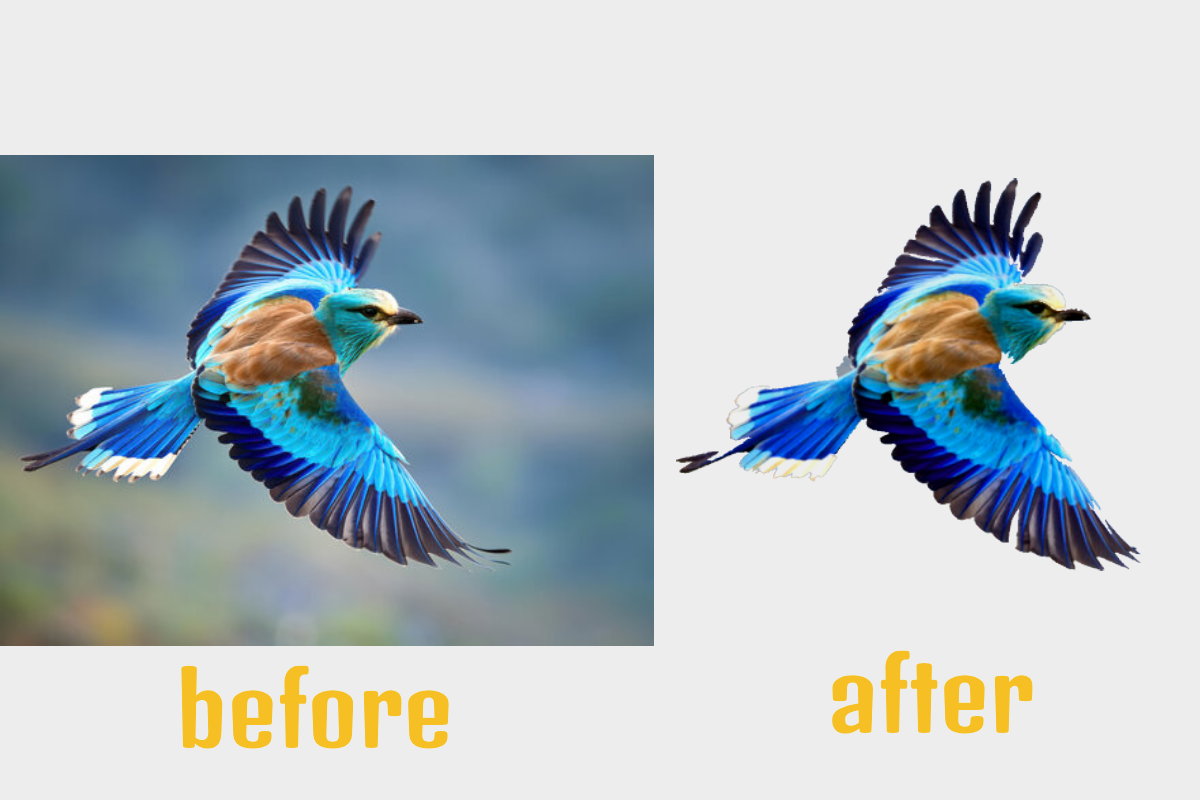
<style>
.page{position:relative;width:1200px;height:800px;background:#ededed}
.page>*{position:absolute;margin:0}
.t1{font:97.6px "DenkOne-Regular";color:#f6bf24}
</style>
<div class="page">
<p class="t1" style="left:832px;top:650px;width:201px;height:84px">after</p>
<p class="t1" style="left:181px;top:665px;width:268px;height:84px">before</p>
</div>
